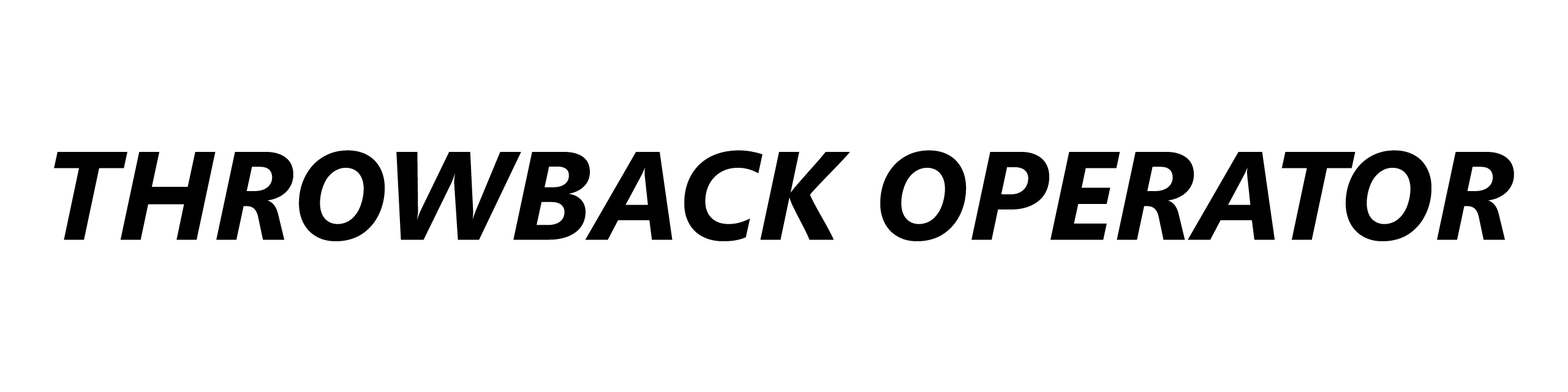
<style>
.page{position:relative;width:1568px;height:392px;background:#ffffff}
.page>*{position:absolute;margin:0}
.t1{font:125.3px "SegoeUI-BoldItalic";color:#000000}
</style>
<div class="page">
<p class="t1" style="left:54px;top:150px;width:1460px;height:91px">THROWBACK OPERATOR</p>
</div>
